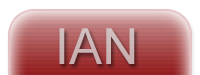
<style>
.page{position:relative;width:200px;height:75px}
.page>*{position:absolute;margin:0}
.t1{font:50px "ArialMT";color:#ccb6b7;text-transform:uppercase}
</style>
<div class="page">
<p class="t1" style="left:59px;top:28px;width:76px;height:36px">iAN</p>
</div>
